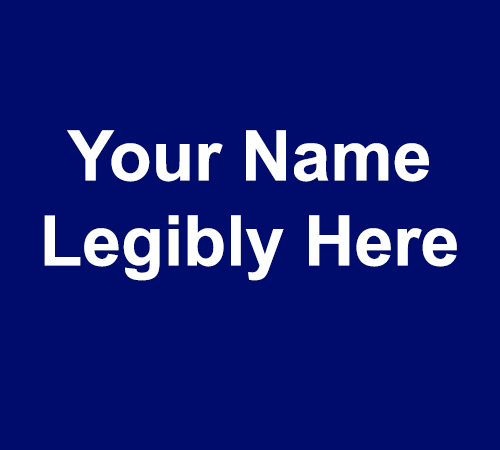
<style>
.page{position:relative;width:500px;height:450px;background:#000c6c}
.page>*{position:absolute;margin:0}
.t1{font:70px/85px "Arial-BoldMT";color:#ffffff}
</style>
<div class="page">
<p class="t1" style="left:44px;top:130px;width:413px;height:151px;text-align:center">Your Name<br>Legibly Here</p>
</div>
